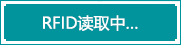
<style>
.page{position:relative;width:181px;height:46px;background:#02949d}
.page>*{position:absolute;margin:0}
.t1{font:16px "MicrosoftYaHeiUI";color:#ffffff}
</style>
<div class="page">
<p class="t1" style="left:43px;top:15px;width:95px;height:16px">RFID读取中…</p>
</div>
